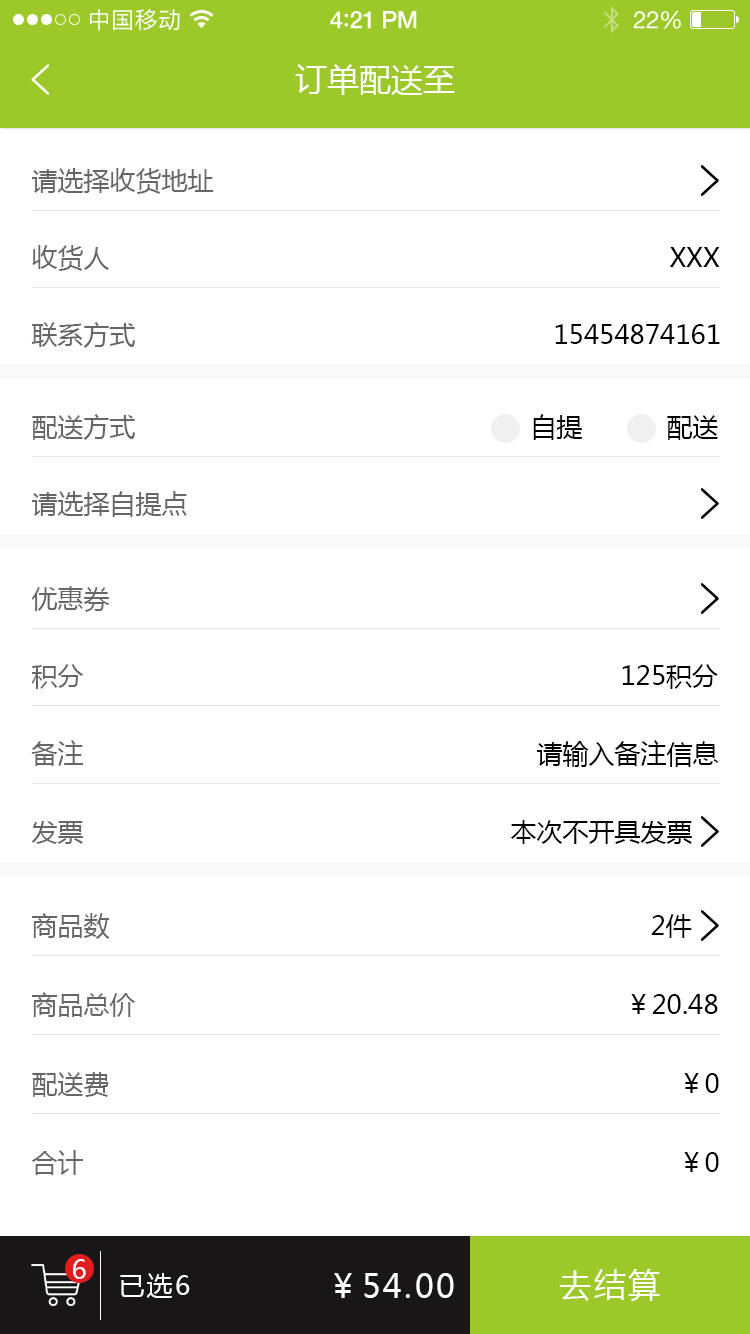
<style>
.page{position:relative;width:750px;height:1334px;background:#ffffff}
.page>*{position:absolute;margin:0}
.t1{font:23px "PingFangSC-Regular";letter-spacing:0.02em;color:#ffffff}
.t2{font:24px "HelveticaNeue-Medium";letter-spacing:-0.02em;color:#ffffff}
.t3{font:26px "Avenir-Medium";letter-spacing:-0.02em;color:#ffffff}
.t4{font:24px "HelveticaNeue";letter-spacing:-0.02em;color:#ffffff}
.t5{font:32px "MicrosoftYaHei";color:#ffffff;text-transform:uppercase}
.t6{font:26px "MicrosoftYaHei";color:#666666;text-transform:uppercase}
.t7{font:26px "MicrosoftYaHei";color:#000000;text-transform:uppercase}
.t8{font:26px "MicrosoftYaHei";letter-spacing:0.08em;color:#ffffff;text-transform:uppercase}
.t9{font:32px "MicrosoftYaHei";letter-spacing:0.08em;color:#ffffff;text-transform:uppercase}
</style>
<div class="page">
<p class="t1" style="left:90px;top:9px;width:90px;height:22px">中国移动</p>
<p class="t2" style="left:330px;top:11px;width:87px;height:18px">4<span class="t3">:</span>21 PM</p>
<p class="t4" style="left:633px;top:11px;width:48px;height:18px">22%</p>
<p class="t5" style="left:295px;top:64px;width:160px;height:31px">订单配送至</p>
<p class="t6" style="left:32px;top:168px;width:182px;height:26px">请选择收货地址</p>
<p class="t6" style="left:32px;top:245px;width:78px;height:26px">收货人</p>
<p class="t7" style="left:669px;top:247px;width:51px;height:20px">xxx</p>
<p class="t6" style="left:31px;top:322px;width:105px;height:26px">联系方式</p>
<p class="t7" style="left:555px;top:324px;width:165px;height:20px">15454874161</p>
<p class="t6" style="left:32px;top:414px;width:104px;height:26px">配送方式</p>
<p class="t7" style="left:533px;top:414px;width:50px;height:26px">自提</p>
<p class="t7" style="left:667px;top:415px;width:51px;height:25px">配送</p>
<p class="t6" style="left:32px;top:491px;width:155px;height:26px">请选择自提点</p>
<p class="t6" style="left:32px;top:586px;width:78px;height:26px">优惠券</p>
<p class="t6" style="left:32px;top:664px;width:52px;height:25px">积分</p>
<p class="t7" style="left:622px;top:664px;width:96px;height:25px">125积分</p>
<p class="t6" style="left:31px;top:740px;width:52px;height:26px">备注</p>
<p class="t7" style="left:537px;top:740px;width:182px;height:27px">请输入备注信息</p>
<p class="t6" style="left:31px;top:821px;width:52px;height:23px">发票</p>
<p class="t7" style="left:511px;top:820px;width:181px;height:24px">本次不开具发票</p>
<p class="t6" style="left:32px;top:913px;width:78px;height:26px">商品数</p>
<p class="t7" style="left:651px;top:914px;width:41px;height:24px">2件</p>
<p class="t6" style="left:32px;top:992px;width:104px;height:25px">商品总价</p>
<p class="t7" style="left:631px;top:994px;width:87px;height:20px">￥20.48</p>
<p class="t6" style="left:32px;top:1072px;width:77px;height:25px">配送费</p>
<p class="t7" style="left:684px;top:1073px;width:35px;height:20px">￥0</p>
<p class="t6" style="left:31px;top:1150px;width:52px;height:25px">合计</p>
<p class="t7" style="left:684px;top:1152px;width:35px;height:20px">￥0</p>
<p class="t8" style="left:73px;top:1259px;width:13px;height:20px">6</p>
<p class="t8" style="left:120px;top:1273px;width:70px;height:25px">已选6</p>
<p class="t9" style="left:334px;top:1273px;width:120px;height:25px">￥54.00</p>
<p class="t9" style="left:559px;top:1269px;width:101px;height:32px">去结算</p>
</div>
